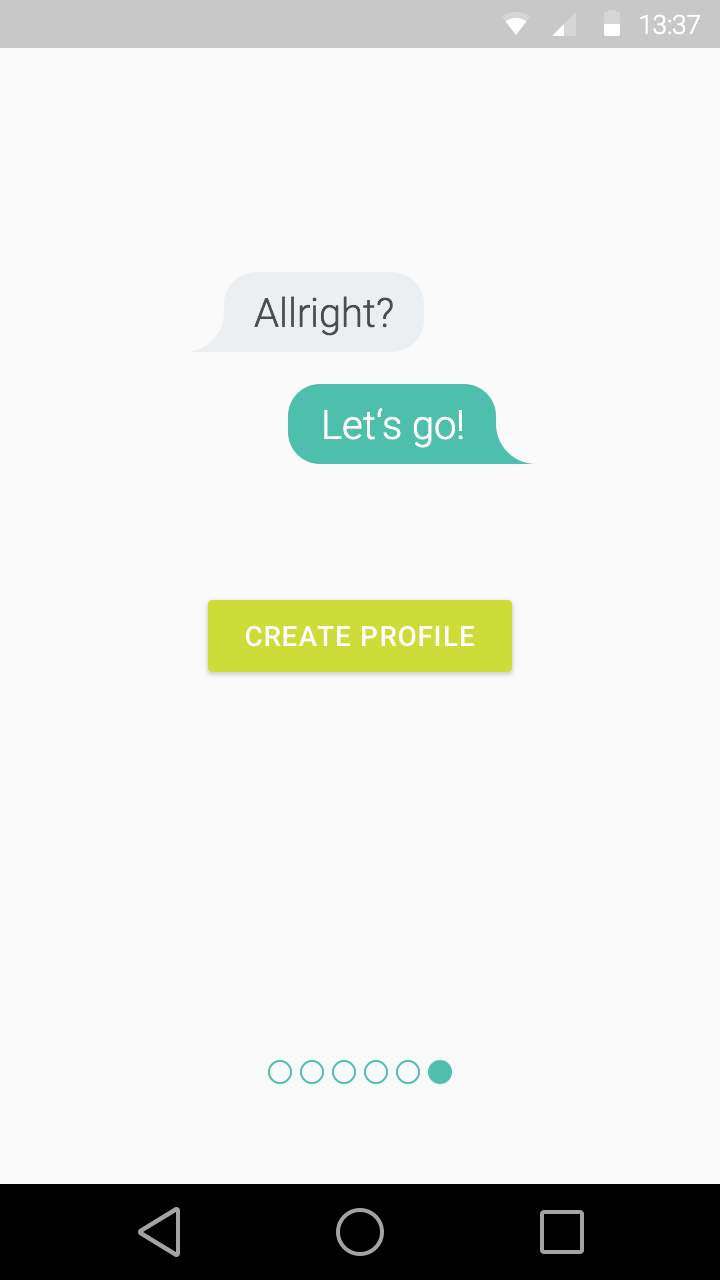
<style>
.page{position:relative;width:720px;height:1280px;background:#fafafa}
.page>*{position:absolute;margin:0}
.t1{font:26.1px "Roboto-Light";color:#ffffff}
.t2{font:40px "Roboto-Light";color:#4d4d4d}
.t3{font:40px "Roboto-Light";color:#ffffff}
.t4{font:28px "Roboto-Medium";letter-spacing:0.04em;color:#ffffff;text-transform:uppercase}
</style>
<div class="page">
<p class="t1" style="left:640px;top:14px;width:60px;height:21px">13:37</p>
<p class="t2" style="left:254px;top:296px;width:139px;height:40px">Allright?</p>
<p class="t3" style="left:324px;top:408px;width:139px;height:40px">Let‘s go!</p>
<p class="t4" style="left:245px;top:625px;width:230px;height:22px">Create Profile</p>
</div>
